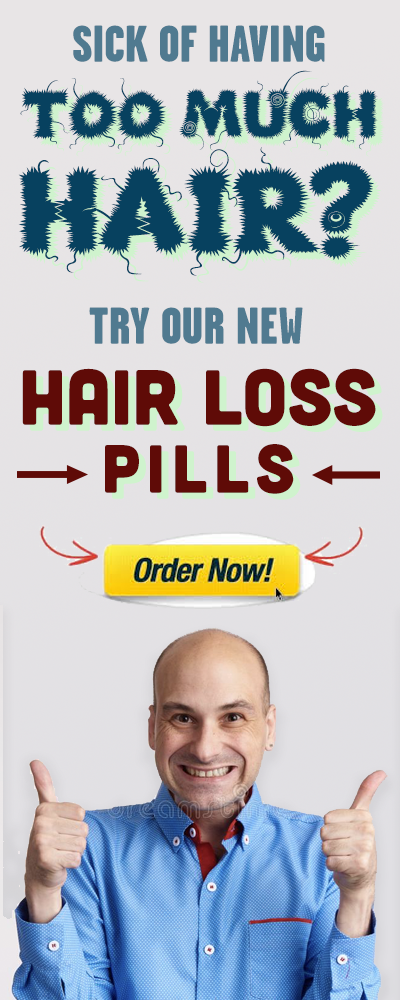
<style>
.page{position:relative;width:400px;height:1000px}
.page>*{position:absolute;margin:0}
.t1{font:52px "GarageGothic-Black";color:#507a90}
.t2{font:68px/114px "KingthingsLupineless";color:#07415f}
.t3{font:120px/114px "KingthingsLupineless";color:#07415f}
.t4{font:68px/114px "KingthingsLupineless"}
.t5{font:120px/114px "KingthingsLupineless"}
.t6{font:78px "Cubano-Regular";color:#5f0b07}
.t7{font:68px "Cubano-Regular";letter-spacing:0.1em;color:#5f0b07}
</style>
<div class="page">
<p class="t1" style="left:73px;top:25px;width:252px;height:37px">SICK OF HAVING</p>
<p class="t2" style="left:18px;top:70px;width:360px;height:206px;text-align:center">TOO MUCH <span class="t3">HAIR?</span></p>
<p class="t4" style="left:25px;top:77px;width:360px;height:206px;text-align:center">TOO MUCH <span class="t5">HAIR?</span></p>
<p class="t1" style="left:89px;top:307px;width:214px;height:37px">TRY OUR NEW</p>
<p class="t6" style="left:22px;top:368px;width:354px;height:59px">HAIR LOSS</p>
<p class="t7" style="left:105px;top:444px;width:189px;height:50px">PILLS</p>
</div>
